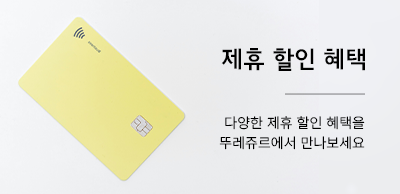
<style>
.page{position:relative;width:400px;height:194px}
.page>*{position:absolute;margin:0}
.t1{font:24.1px "JejuGothic";color:#000000}
.t2{font:14.1px/20.1px "NotoSansKR-Light";color:#000000}
</style>
<div class="page">
<p class="t1" style="left:221px;top:48px;width:144px;height:23px">제휴 할인 혜택</p>
<p class="t2" style="left:219px;top:116px;width:146px;height:34px;text-align:right">다양한 제휴 할인 혜택을<br>뚜레쥬르에서 만나보세요</p>
</div>
